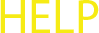
<style>
.page{position:relative;width:99px;height:33px;background:#ffffff}
.page>*{position:absolute;margin:0}
.t1{font:48px "MyriadPro-Regular";color:#f6eb14}
</style>
<div class="page">
<p class="t1" style="left:0px;top:0px;width:99px;height:33px">HELP</p>
</div>
